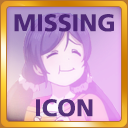
<style>
.page{position:relative;width:128px;height:128px}
.page>*{position:absolute;margin:0}
.t1{font:24px "DorisPFC-Bold";color:#42176e}
.t2{font:24px "DorisPFC-Bold";color:#58317b}
</style>
<div class="page">
<p class="t1" style="left:14px;top:14px;width:100px;height:18px;opacity:0.92">MISSING</p>
<p class="t2" style="left:36px;top:99px;width:57px;height:18px">ICON</p>
</div>
